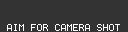
<style>
.page{position:relative;width:128px;height:32px;background:#333333}
.page>*{position:absolute;margin:0}
.t1{font:8px "Terminal";color:#ffffff}
</style>
<div class="page">
<p class="t1" style="left:7px;top:24px;width:113px;height:7px">AIM FOR CAMERA SHOT</p>
</div>
